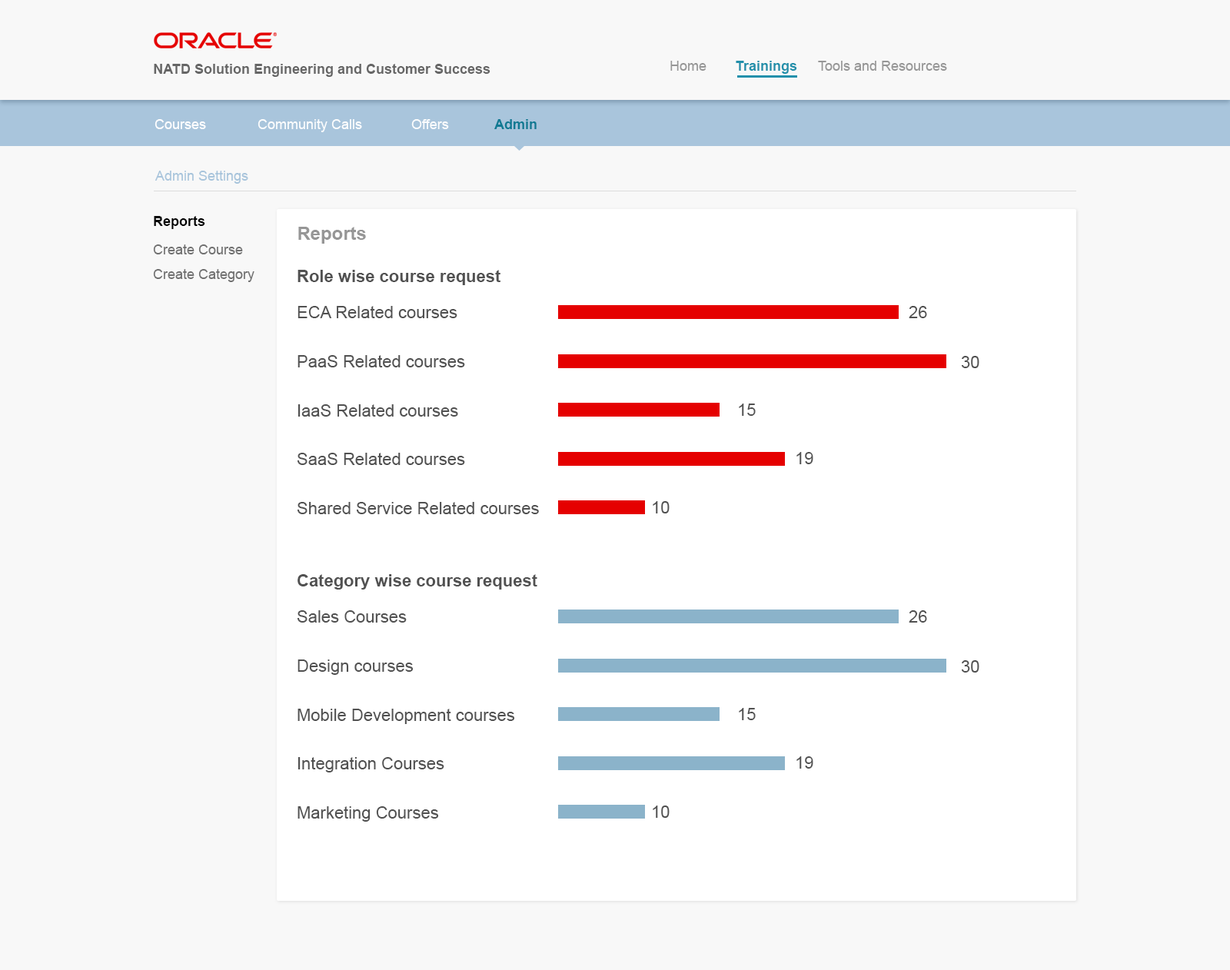
<style>
.page{position:relative;width:1230px;height:970px;background:#f8f8f8}
.page>*{position:absolute;margin:0}
.t1{font:13.8px "Arial-BoldMT";color:#666666}
.t2{font:13.8px "ArialMT";color:#969696}
.t3{font:13.8px "Arial-BoldMT";color:#2290ab}
.t4{font:13.8px "ArialMT";color:#ffffff}
.t5{font:13.8px "Arial-BoldMT";color:#00758f}
.t6{font:13.8px "ArialMT";color:#a9c5dc}
.t7{font:13.8px "Arial-BoldMT";color:#000000}
.t8{font:18.4px "Arial-BoldMT";color:#969696}
.t9{font:13.8px "ArialMT";color:#717171}
.t10{font:16.9px "Arial-BoldMT";color:#515151}
.t11{font:16.9px "ArialMT";color:#515151}
</style>
<div class="page">
<p class="t1" style="left:154px;top:64px;width:336px;height:13px">NATD Solution Engineering and Customer Success</p>
<p class="t2" style="left:670px;top:61px;width:36px;height:10px">Home</p>
<p class="t3" style="left:735px;top:61px;width:62px;height:13px">Trainings</p>
<p class="t2" style="left:818px;top:61px;width:129px;height:10px">Tools and Resources</p>
<p class="t4" style="left:154px;top:119px;width:52px;height:10px">Courses</p>
<p class="t4" style="left:257px;top:119px;width:105px;height:13px;opacity:0.95">Community Calls</p>
<p class="t4" style="left:411px;top:119px;width:38px;height:10px;opacity:0.95">Offers</p>
<p class="t5" style="left:494px;top:119px;width:42px;height:10px;opacity:0.95">Admin</p>
<p class="t6" style="left:154px;top:171px;width:94px;height:13px">Admin Settings</p>
<p class="t7" style="left:154px;top:216px;width:51px;height:13px">Reports</p>
<p class="t8" style="left:298px;top:227px;width:68px;height:17px">Reports</p>
<p class="t9" style="left:153px;top:244px;width:90px;height:10px">Create Course</p>
<p class="t9" style="left:153px;top:269px;width:101px;height:13px">Create Category</p>
<p class="t10" style="left:297px;top:270px;width:203px;height:15px">Role wise course request</p>
<p class="t11" style="left:297px;top:306px;width:160px;height:12px">ECA Related courses</p>
<p class="t11" style="left:908px;top:306px;width:19px;height:12px">26</p>
<p class="t11" style="left:297px;top:355px;width:168px;height:12px">PaaS Related courses</p>
<p class="t11" style="left:961px;top:356px;width:18px;height:12px">30</p>
<p class="t11" style="left:297px;top:404px;width:161px;height:13px">IaaS Related courses</p>
<p class="t11" style="left:739px;top:403px;width:16px;height:13px">15</p>
<p class="t11" style="left:297px;top:453px;width:168px;height:12px">SaaS Related courses</p>
<p class="t11" style="left:796px;top:452px;width:17px;height:12px">19</p>
<p class="t11" style="left:297px;top:502px;width:242px;height:12px">Shared Service Related courses</p>
<p class="t11" style="left:652px;top:501px;width:17px;height:12px">10</p>
<p class="t10" style="left:297px;top:574px;width:240px;height:15px">Category wise course request</p>
<p class="t11" style="left:297px;top:610px;width:110px;height:12px">Sales Courses</p>
<p class="t11" style="left:908px;top:610px;width:19px;height:12px">26</p>
<p class="t11" style="left:297px;top:659px;width:116px;height:16px">Design courses</p>
<p class="t11" style="left:961px;top:660px;width:18px;height:12px">30</p>
<p class="t11" style="left:297px;top:709px;width:218px;height:15px">Mobile Development courses</p>
<p class="t11" style="left:739px;top:708px;width:16px;height:12px">15</p>
<p class="t11" style="left:297px;top:757px;width:147px;height:15px">Integration Courses</p>
<p class="t11" style="left:796px;top:756px;width:17px;height:12px">19</p>
<p class="t11" style="left:297px;top:806px;width:142px;height:15px">Marketing Courses</p>
<p class="t11" style="left:652px;top:805px;width:17px;height:13px">10</p>
</div>
